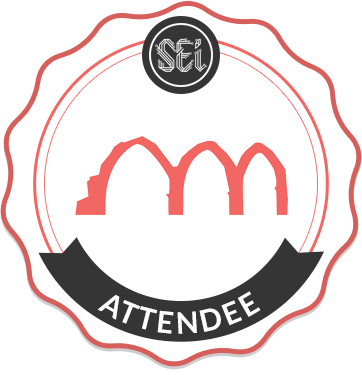
<style>
.page{position:relative;width:362px;height:375px;background:#ffffff}
.page>*{position:absolute;margin:0}
.t1{font:29.7px "Lato-Bold";letter-spacing:0.1em;color:#ffffff}
</style>
<div class="page">
<p class="t1" style="left:97px;top:291px;width:164px;height:43px">ATTENDEE</p>
</div>
